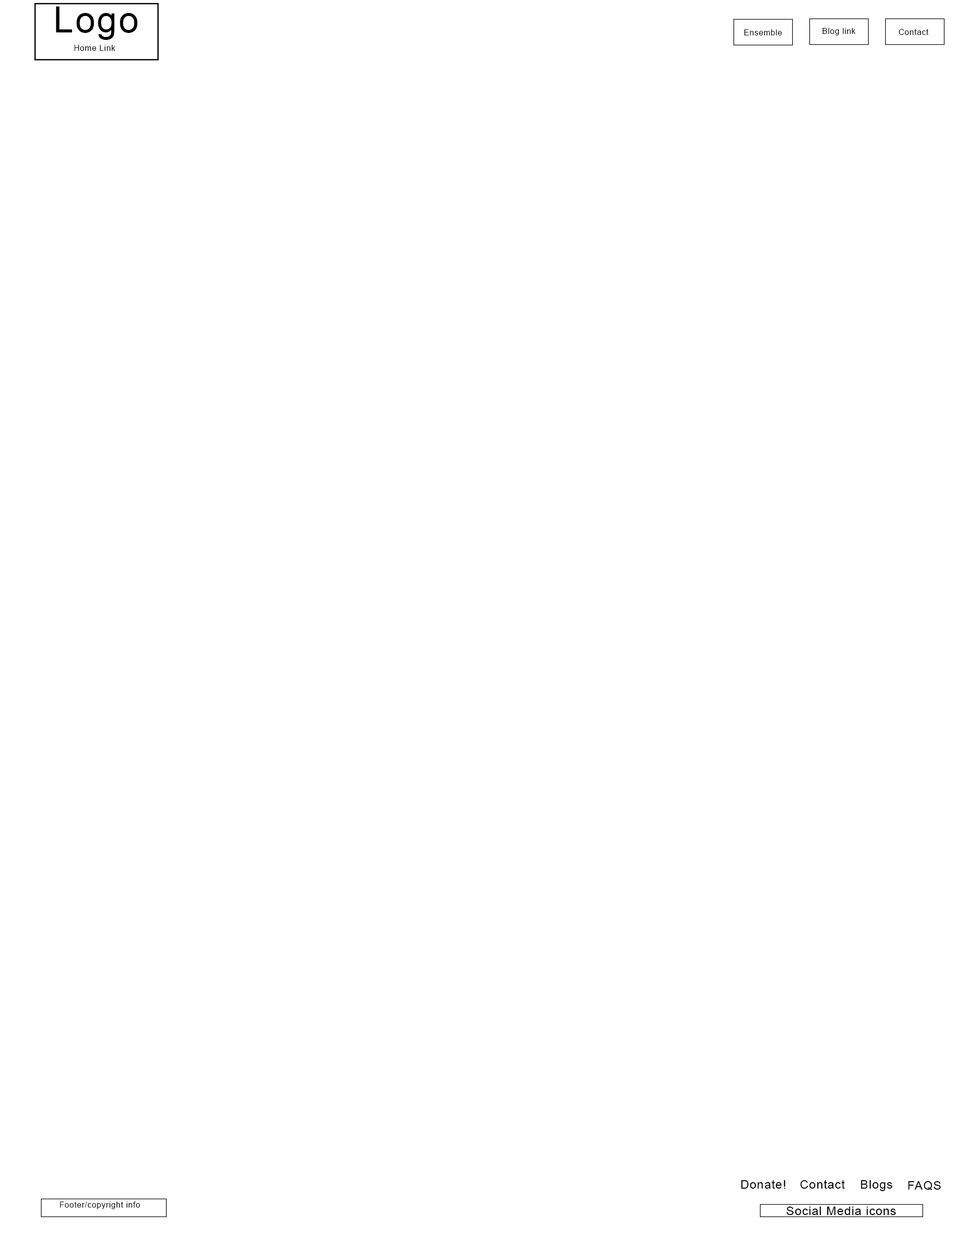
<style>
.page{position:relative;width:958px;height:1245px;background:#ffffff}
.page>*{position:absolute;margin:0}
.t1{font:35.9px "ArialMT";letter-spacing:0.05em;color:#000000}
.t2{font:8px "ArialMT";letter-spacing:0.05em;color:#000000}
.t3{font:12px "ArialMT";letter-spacing:0.05em;color:#000000}
</style>
<div class="page">
<p class="t1" style="left:56px;top:6px;width:82px;height:34px">Logo</p>
<p class="t2" style="left:744px;top:29px;width:38px;height:6px">Ensemble</p>
<p class="t2" style="left:822px;top:28px;width:33px;height:7px">Blog link</p>
<p class="t2" style="left:898px;top:29px;width:30px;height:6px">Contact</p>
<p class="t2" style="left:74px;top:45px;width:41px;height:6px">Home Link</p>
<p class="t3" style="left:741px;top:1180px;width:44px;height:9px">Donate!</p>
<p class="t3" style="left:800px;top:1180px;width:45px;height:9px">Contact</p>
<p class="t3" style="left:860px;top:1180px;width:32px;height:11px">Blogs</p>
<p class="t3" style="left:908px;top:1181px;width:33px;height:9px">FAQS</p>
<p class="t2" style="left:60px;top:1202px;width:80px;height:7px">Footer/copyright info</p>
<p class="t3" style="left:786px;top:1207px;width:110px;height:8px">Social Media icons</p>
</div>
